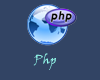
<style>
.page{position:relative;width:100px;height:80px;background:#324464}
.page>*{position:absolute;margin:0}
.t1{font:12px "VinerHandITC";color:#95feee}
</style>
<div class="page">
<p class="t1" style="left:33px;top:53px;width:23px;height:17px">Php</p>
</div>
